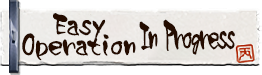
<style>
.page{position:relative;width:262px;height:75px;background:#ffffff}
.page>*{position:absolute;margin:0}
.t1{font:30px/20px "TA_taoyame";letter-spacing:-0.1em;color:#240c00;font-weight:bold}
.t2{font:36px "TA_taoyame";letter-spacing:-0.16em;color:#240c00;font-weight:bold;scale:0.62 1}
</style>
<div class="page">
<p class="t1" style="left:22px;top:13px;width:114px;height:48px;text-align:center">Easy<br>Operation</p>
<p class="t2" style="left:139px;top:19px;width:96px;height:36px">In Progress</p>
</div>
